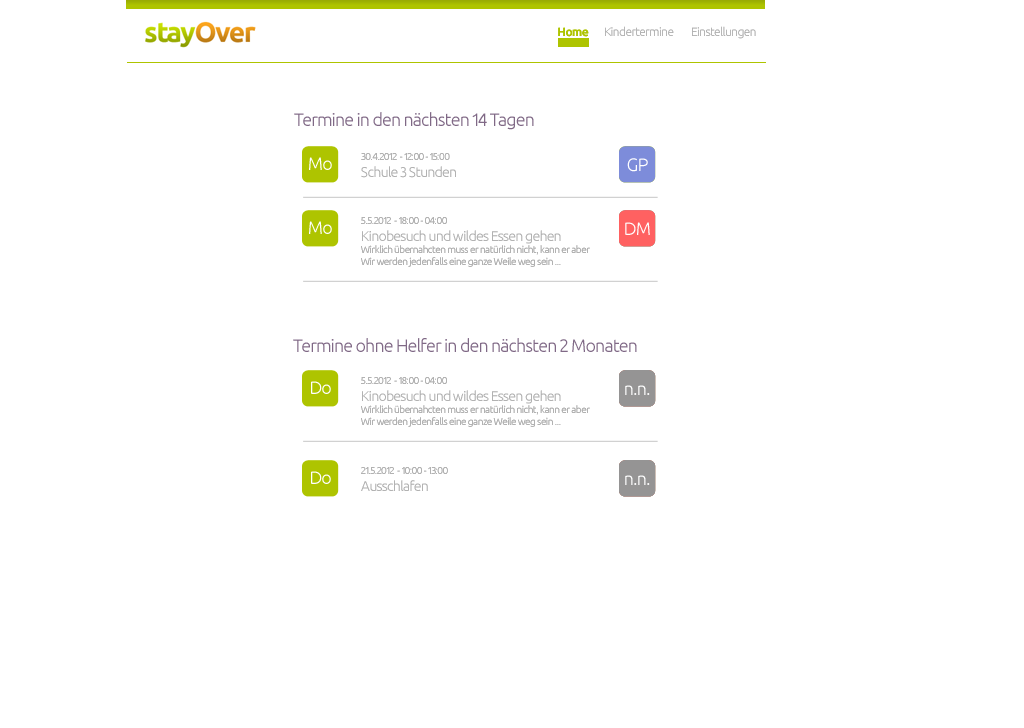
<style>
.page{position:relative;width:1024px;height:728px;background:#ffffff}
.page>*{position:absolute;margin:0}
.t1{font:12px "Ubuntu-Bold";letter-spacing:-0.05em;color:#aec400}
.t2{font:12px "Ubuntu-Light";letter-spacing:-0.05em;color:#b2b2b2}
.t3{font:18px "Ubuntu-Light";letter-spacing:-0.05em;color:#806986}
.t4{font:18px "Ubuntu-Light";letter-spacing:-0.05em;color:#ffffff}
.t5{font:10px "Ubuntu-Light";letter-spacing:-0.05em;color:#b2b2b2}
.t6{font:14px "Ubuntu-Light";letter-spacing:-0.05em;color:#b2b2b2}
</style>
<div class="page">
<p class="t1" style="left:558px;top:27px;width:31px;height:10px">Home</p>
<p class="t2" style="left:605px;top:26px;width:69px;height:10px">Kindertermine</p>
<p class="t2" style="left:692px;top:26px;width:64px;height:13px">Einstellungen</p>
<p class="t3" style="left:294px;top:112px;width:240px;height:18px">Termine in den nächsten 14 Tagen</p>
<p class="t4" style="left:309px;top:157px;width:23px;height:13px">Mo</p>
<p class="t5" style="left:361px;top:153px;width:95px;height:25px">30.4.2012  - 12:00 - 15:00<br><span class="t6">Schule 3 Stunden</span></p>
<p class="t4" style="left:627px;top:158px;width:21px;height:14px">GP</p>
<p class="t4" style="left:309px;top:221px;width:23px;height:13px">Mo</p>
<p class="t5" style="left:361px;top:217px;width:229px;height:50px">5.5.2012  - 18:00 - 04:00<br><span class="t6">Kinobesuch und wildes Essen gehen<br></span>Wirklich übernahcten muss er natürlich nicht, kann er aber<br>Wir werden jedenfalls eine ganze Weile weg sein ...</p>
<p class="t4" style="left:625px;top:222px;width:25px;height:13px">DM</p>
<p class="t3" style="left:293px;top:338px;width:344px;height:14px">Termine ohne Helfer in den nächsten 2 Monaten</p>
<p class="t5" style="left:361px;top:377px;width:229px;height:50px">5.5.2012  - 18:00 - 04:00<br><span class="t6">Kinobesuch und wildes Essen gehen<br></span>Wirklich übernahcten muss er natürlich nicht, kann er aber<br>Wir werden jedenfalls eine ganze Weile weg sein ...</p>
<p class="t4" style="left:311px;top:381px;width:20px;height:13px">Do</p>
<p class="t4" style="left:625px;top:385px;width:25px;height:10px">n.n.</p>
<p class="t4" style="left:311px;top:471px;width:20px;height:13px">Do</p>
<p class="t5" style="left:361px;top:467px;width:87px;height:24px">21.5.2012  - 10:00 - 13:00<br><span class="t6">Ausschlafen</span></p>
<p class="t4" style="left:625px;top:475px;width:25px;height:10px">n.n.</p>
</div>
